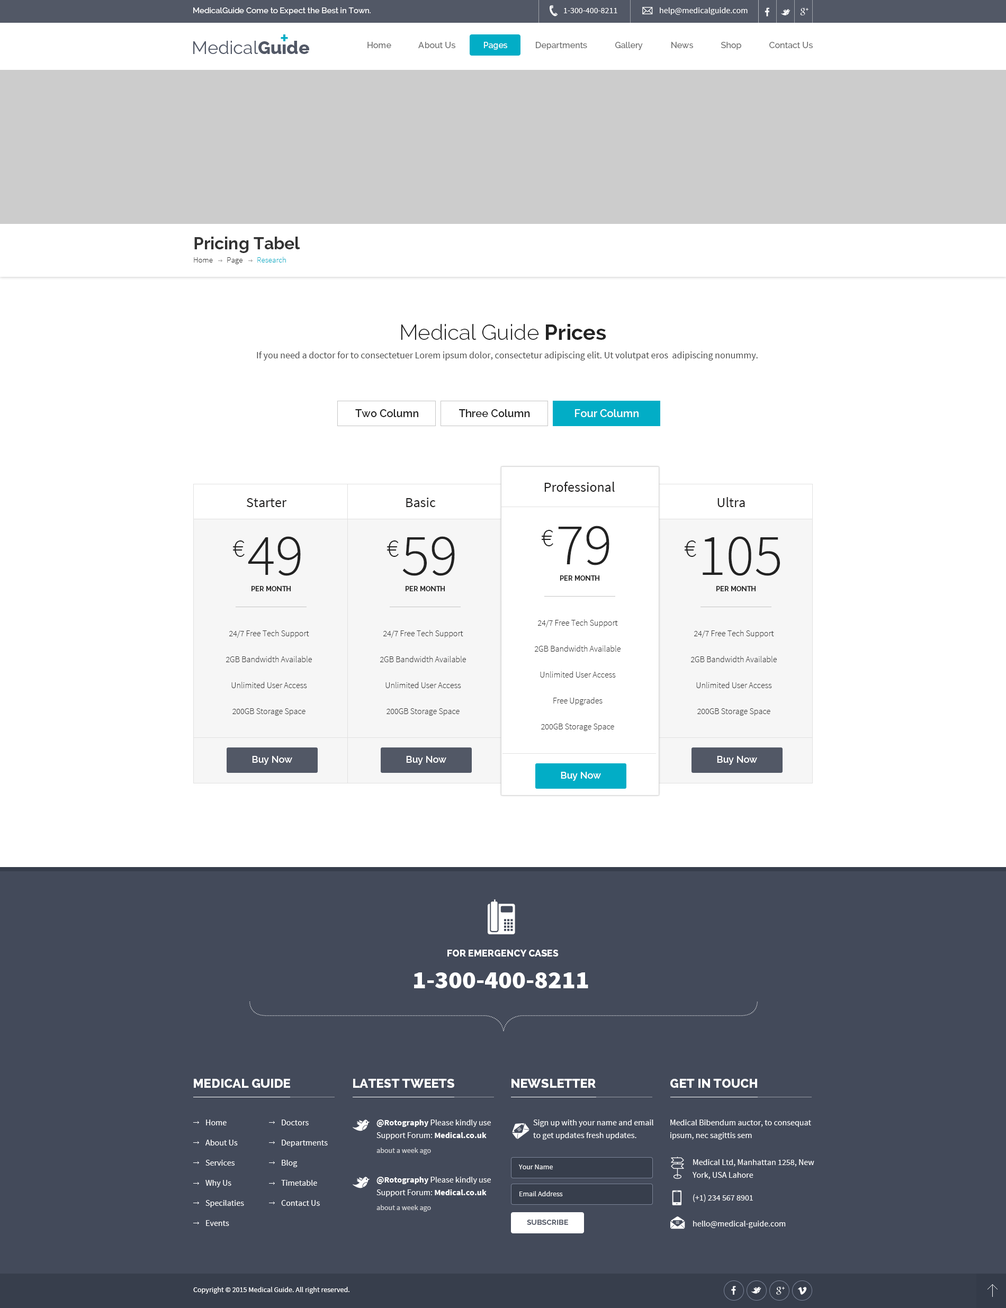
<style>
.page{position:relative;width:1006px;height:1308px;background:#ffffff}
.page>*{position:absolute;margin:0}
.t1{font:7.9px "Raleway-Medium";color:#ffffff}
.t2{font:8.5px "SourceSansPro-Regular";color:#ffffff}
.t3{font:10.7px "invent-communication";color:#ffffff}
.t4{font:8.5px "Raleway-Medium";color:#707070}
.t5{font:8.5px "Raleway-Medium";color:#ffffff}
.t6{font:16.9px "Raleway-Bold";color:#323232}
.t7{font:7.9px "SourceSansPro-Light";color:#333333}
.t8{font:7.9px "SourceSansPro-Light";color:#02adc6}
.t9{font:21.2px "Raleway-Light";color:#222222}
.t10{font:21.2px "Raleway-Bold";color:#222222}
.t11{font:9.5px "SourceSansPro-Regular";color:#4a4a4a}
.t12{font:10.6px "Raleway-SemiBold";color:#222222}
.t13{font:10.6px "Raleway-SemiBold";color:#ffffff}
.t14{font:13.8px "SourceSansPro-Regular";color:#232222}
.t15{font:25.4px "SourceSansPro-Light";color:#222222}
.t16{font:58.8px "SourceSansPro-Light";color:#222222}
.t17{font:6.9px "Raleway-Bold";color:#222222;text-transform:uppercase}
.t18{font:8.5px/25.9px "SourceSansPro-Light";color:#333333}
.t19{font:9.5px "Raleway-SemiBold";color:#ffffff}
.t20{font:37.1px "invent-communication";color:#ffffff}
.t21{font:9.5px "Raleway-ExtraBold";color:#ffffff;text-transform:uppercase}
.t22{font:25.4px "SourceSansPro-Black";color:#ffffff}
.t23{font:12.7px "Raleway-ExtraBold";color:#ffffff;text-transform:uppercase}
.t24{font:8.5px/20.1px "SourceSansPro-Regular";color:#ffffff}
.t25{font:8.5px/12.7px "SourceSansPro-Regular";color:#ffffff}
.t26{font:8.5px/12.7px "SourceSansPro-Bold";color:#ffffff}
.t27{font:7.4px "SourceSansPro-Regular";color:#d3d4d7}
.t28{font:7.4px "SourceSansPro-Regular";color:#ffffff}
.t29{font:7.4px "Raleway-Bold";color:#525866;text-transform:uppercase}
</style>
<div class="page">
<p class="t1" style="left:193px;top:7px;width:178px;height:8px">MedicalGuide Come to Expect the Best in Town.</p>
<p class="t2" style="left:564px;top:8px;width:53px;height:5px">1-300-400-8211</p>
<p class="t3" style="left:642px;top:7px;width:11px;height:7px">(</p>
<p class="t2" style="left:660px;top:7px;width:88px;height:8px">help@medicalguide.com</p>
<p class="t4" style="left:367px;top:42px;width:446px;height:8px">Home             About Us             <span class="t5">Pages</span>             Departments             Gallery             News             Shop             Contact Us</p>
<p class="t6" style="left:194px;top:237px;width:106px;height:16px">Pricing Tabel</p>
<p class="t7" style="left:194px;top:257px;width:19px;height:6px">Home</p>
<p class="t7" style="left:227px;top:257px;width:15px;height:7px">Page</p>
<p class="t8" style="left:257px;top:257px;width:29px;height:6px">Research</p>
<p class="t9" style="left:401px;top:324px;width:205px;height:16px">Medical Guide <span class="t10">Prices</span></p>
<p class="t11" style="left:257px;top:352px;width:501px;height:9px">If you need a doctor for to consectetuer Lorem ipsum dolor, consectetur adipiscing elit. Ut volutpat eros  adipiscing nonummy.</p>
<p class="t12" style="left:355px;top:409px;width:63px;height:8px">Two Column</p>
<p class="t12" style="left:459px;top:409px;width:71px;height:8px">Three Column</p>
<p class="t13" style="left:575px;top:409px;width:63px;height:8px">Four Column</p>
<p class="t14" style="left:544px;top:482px;width:71px;height:10px">Professional</p>
<p class="t14" style="left:406px;top:498px;width:30px;height:9px">Basic</p>
<p class="t14" style="left:717px;top:497px;width:28px;height:10px">Ultra</p>
<p class="t14" style="left:247px;top:498px;width:40px;height:9px">Starter</p>
<p class="t15" style="left:542px;top:530px;width:11px;height:16px">€</p>
<p class="t16" style="left:558px;top:526px;width:51px;height:39px">79</p>
<p class="t15" style="left:233px;top:541px;width:12px;height:16px">€</p>
<p class="t16" style="left:248px;top:536px;width:53px;height:40px">49</p>
<p class="t15" style="left:387px;top:541px;width:12px;height:16px">€</p>
<p class="t16" style="left:402px;top:536px;width:53px;height:40px">59</p>
<p class="t15" style="left:685px;top:541px;width:11px;height:16px">€</p>
<p class="t16" style="left:703px;top:536px;width:77px;height:40px">105</p>
<p class="t17" style="left:560px;top:575px;width:39px;height:6px">per month</p>
<p class="t17" style="left:251px;top:586px;width:40px;height:5px">per month</p>
<p class="t17" style="left:406px;top:586px;width:39px;height:5px">per month</p>
<p class="t17" style="left:716px;top:586px;width:39px;height:5px">per month</p>
<p class="t18" style="left:226px;top:630px;width:86px;height:86px;text-align:center">24/7 Free Tech Support<br>2GB Bandwidth Available<br>Unlimited User Access<br>200GB Storage Space</p>
<p class="t18" style="left:380px;top:630px;width:86px;height:86px;text-align:center">24/7 Free Tech Support<br>2GB Bandwidth Available<br>Unlimited User Access<br>200GB Storage Space</p>
<p class="t18" style="left:535px;top:619px;width:85px;height:112px;text-align:center">24/7 Free Tech Support<br>2GB Bandwidth Available<br>Unlimited User Access<br>Free Upgrades<br>200GB Storage Space</p>
<p class="t18" style="left:691px;top:630px;width:86px;height:86px;text-align:center">24/7 Free Tech Support<br>2GB Bandwidth Available<br>Unlimited User Access<br>200GB Storage Space</p>
<p class="t19" style="left:252px;top:756px;width:40px;height:9px">Buy Now</p>
<p class="t19" style="left:406px;top:756px;width:40px;height:9px">Buy Now</p>
<p class="t19" style="left:717px;top:756px;width:40px;height:9px">Buy Now</p>
<p class="t19" style="left:561px;top:772px;width:40px;height:9px">Buy Now</p>
<p class="t20" style="left:488px;top:899px;width:27px;height:35px">0</p>
<p class="t21" style="left:447px;top:950px;width:112px;height:7px">For emergency cases</p>
<p class="t22" style="left:414px;top:973px;width:174px;height:15px">1-300-400-8211</p>
<p class="t23" style="left:194px;top:1079px;width:96px;height:9px">Medical guide</p>
<p class="t23" style="left:353px;top:1079px;width:101px;height:9px">LATEST TWEETS</p>
<p class="t23" style="left:511px;top:1079px;width:85px;height:9px">NEWSLETTER</p>
<p class="t23" style="left:670px;top:1079px;width:87px;height:9px">GET IN TOUCH</p>
<p class="t24" style="left:205px;top:1120px;width:39px;height:106px">Home<br>About Us<br>Services<br>Why Us<br>Specilaties<br>Events</p>
<p class="t24" style="left:281px;top:1120px;width:47px;height:86px">Doctors<br>Departments<br>Blog<br>Timetable<br>Contact Us</p>
<p class="t25" style="left:376px;top:1120px;width:115px;height:20px"><span class="t26">@Rotography</span> Please kindly use <br>Support Forum: <span class="t26">Medical.co.uk</span></p>
<p class="t25" style="left:533px;top:1120px;width:120px;height:20px">Sign up with your name and email<br>to get updates fresh updates.</p>
<p class="t25" style="left:670px;top:1120px;width:141px;height:20px">Medical Bibendum auctor, to consequat<br>ipsum, nec sagittis sem</p>
<p class="t27" style="left:376px;top:1148px;width:55px;height:7px">about a week ago</p>
<p class="t28" style="left:518px;top:1165px;width:35px;height:4px;opacity:0.9">Your Name</p>
<p class="t25" style="left:692px;top:1159px;width:122px;height:21px">Medical Ltd, Manhattan 1258, New<br>York, USA Lahore</p>
<p class="t25" style="left:376px;top:1177px;width:115px;height:20px"><span class="t26">@Rotography</span> Please kindly use <br>Support Forum: <span class="t26">Medical.co.uk</span></p>
<p class="t28" style="left:519px;top:1191px;width:44px;height:5px;opacity:0.9">Email Address</p>
<p class="t27" style="left:376px;top:1205px;width:55px;height:7px">about a week ago</p>
<p class="t2" style="left:693px;top:1194px;width:60px;height:8px">(+1) 234 567 8901</p>
<p class="t29" style="left:527px;top:1220px;width:41px;height:5px">subscribe</p>
<p class="t2" style="left:693px;top:1221px;width:93px;height:7px">hello@medical-guide.com</p>
<p class="t28" style="left:193px;top:1287px;width:156px;height:7px">Copyright © 2015 Medical Guide. All right reserved.</p>
</div>
